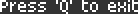
<style>
.page{position:relative;width:138px;height:14px;background:#333333}
.page>*{position:absolute;margin:0}
.t1{font:16px "Poke";color:#ffffff}
</style>
<div class="page">
<p class="t1" style="left:0px;top:0px;width:138px;height:14px">Press 'Q' to exit</p>
</div>
